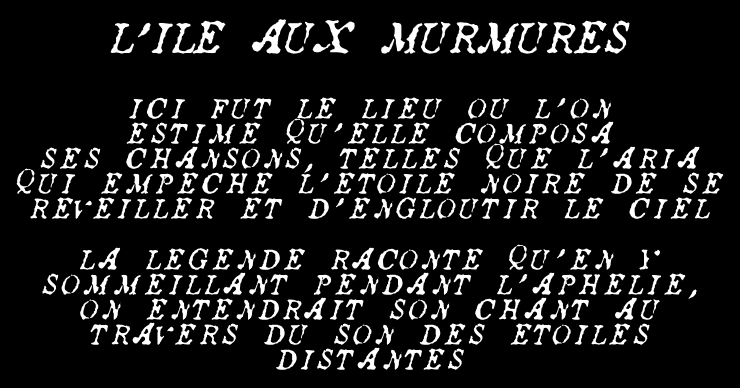
<style>
.page{position:relative;width:740px;height:388px;background:#000000}
.page>*{position:absolute;margin:0}
.t1{font:70px "AncientStory";color:#ffffff}
.t2{font:70px "AquilineTwo";color:#ffffff}
.t3{font:45px/25px "AncientStory";letter-spacing:0.1em;color:#ffffff}
.t4{font:45px/25px "AquilineTwo";letter-spacing:0.1em;color:#ffffff}
</style>
<div class="page">
<p class="t1" style="left:110px;top:19px;width:520px;height:35px">L<span class="t2">'</span>Ile aux Murmures</p>
<p class="t3" style="left:16px;top:97px;width:708px;height:122px;text-align:center">Ici fut le lieu ou l<span class="t4">'</span>on<br>estime qu<span class="t4">'</span>elle composa<br>ses chansons<span class="t4">,</span> telles que l<span class="t4">'</span>aria<br>qui empeche l<span class="t4">'</span>etoile noire de se<br>reveiller et d<span class="t4">'</span>engloutir le ciel</p>
<p class="t3" style="left:42px;top:244px;width:655px;height:126px;text-align:center">La legende raconte qu<span class="t4">'</span>en y<br>sommeillant pendant l<span class="t4">'</span>aphelie<span class="t4">,<br></span>on entendrait son chant au<br>travers du son des Etoiles<br>distantes</p>
</div>
